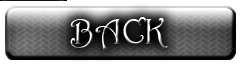
<style>
.page{position:relative;width:242px;height:67px}
.page>*{position:absolute;margin:0}
.t1{font:36px "Harrington"}
</style>
<div class="page">
<p class="t1" style="left:70px;top:17px;width:98px;height:33px">BACK</p>
</div>
